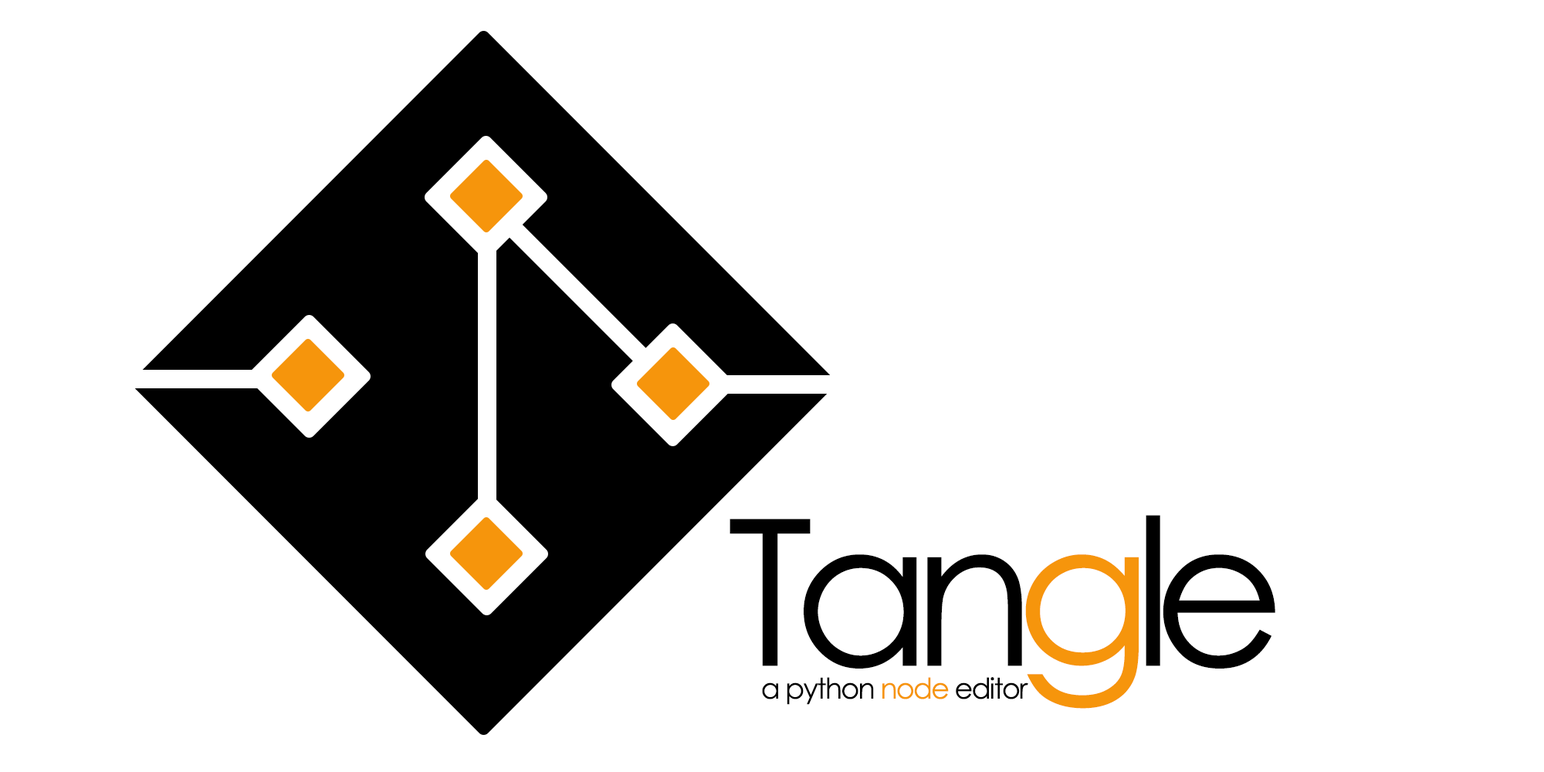
<style>
.page{position:relative;width:1544px;height:772px;background:#ffffff}
.page>*{position:absolute;margin:0}
.t1{font:204.1px "CenturyGothic";letter-spacing:-0.1em;color:#000000}
.t2{font:204.1px "CenturyGothic";letter-spacing:-0.1em;color:#f6950c}
.t3{font:28.6px "CenturyGothic";letter-spacing:-0.05em;color:#000000}
.t4{font:28.6px "CenturyGothic";letter-spacing:-0.05em;color:#f6950c}
</style>
<div class="page">
<p class="t1" style="left:730px;top:515px;width:546px;height:194px">Tan<span class="t2">g</span>le</p>
<p class="t3" style="left:762px;top:677px;width:267px;height:28px">a python <span class="t4">node </span>editor</p>
</div>
